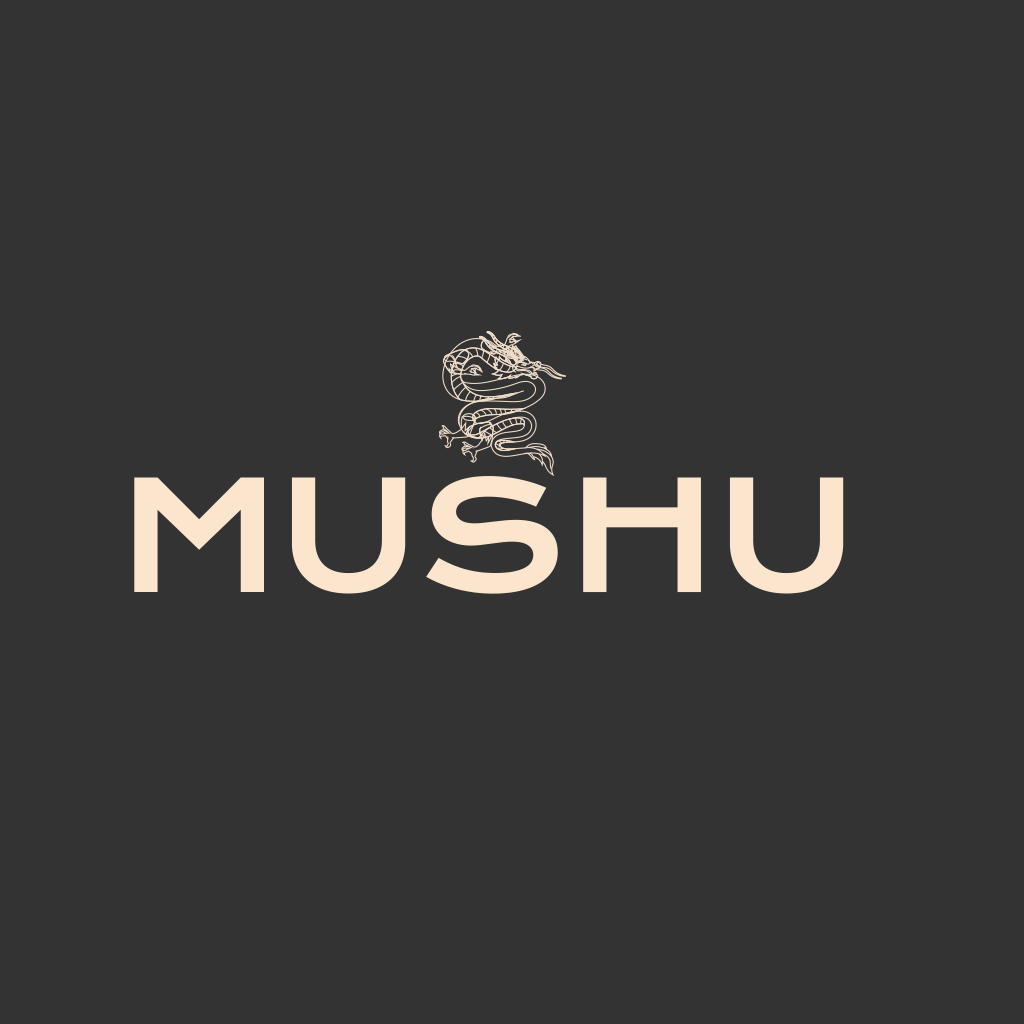
<style>
.page{position:relative;width:1024px;height:1024px;background:#333333}
.page>*{position:absolute;margin:0}
.t1{font:150px "KronaOne-Regular";color:#fce5cd}
</style>
<div class="page">
<p class="t1" style="left:134px;top:476px;width:710px;height:118px">MUSHU</p>
</div>
